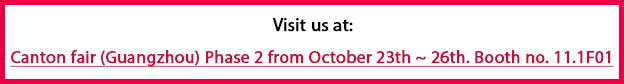
<style>
.page{position:relative;width:624px;height:84px;background:#ffffff}
.page>*{position:absolute;margin:0}
.t1{font:18px "MyriadPro-Regular";color:#000000;font-weight:bold}
.t2{font:20px "MyriadPro-Regular";color:#000000;font-weight:bold}
.t3{font:17.5px "MyriadPro-Regular";color:#c50f3c;font-weight:bold;text-decoration:underline}
</style>
<div class="page">
<p class="t1" style="left:272px;top:18px;width:81px;height:14px"><span class="t2">                                                        </span>Visit us at:</p>
<p class="t3" style="left:10px;top:50px;width:604px;height:17px">Canton fair (Guangzhou) Phase 2 from October 23th ~ 26th. Booth no. 11.1F01</p>
</div>
